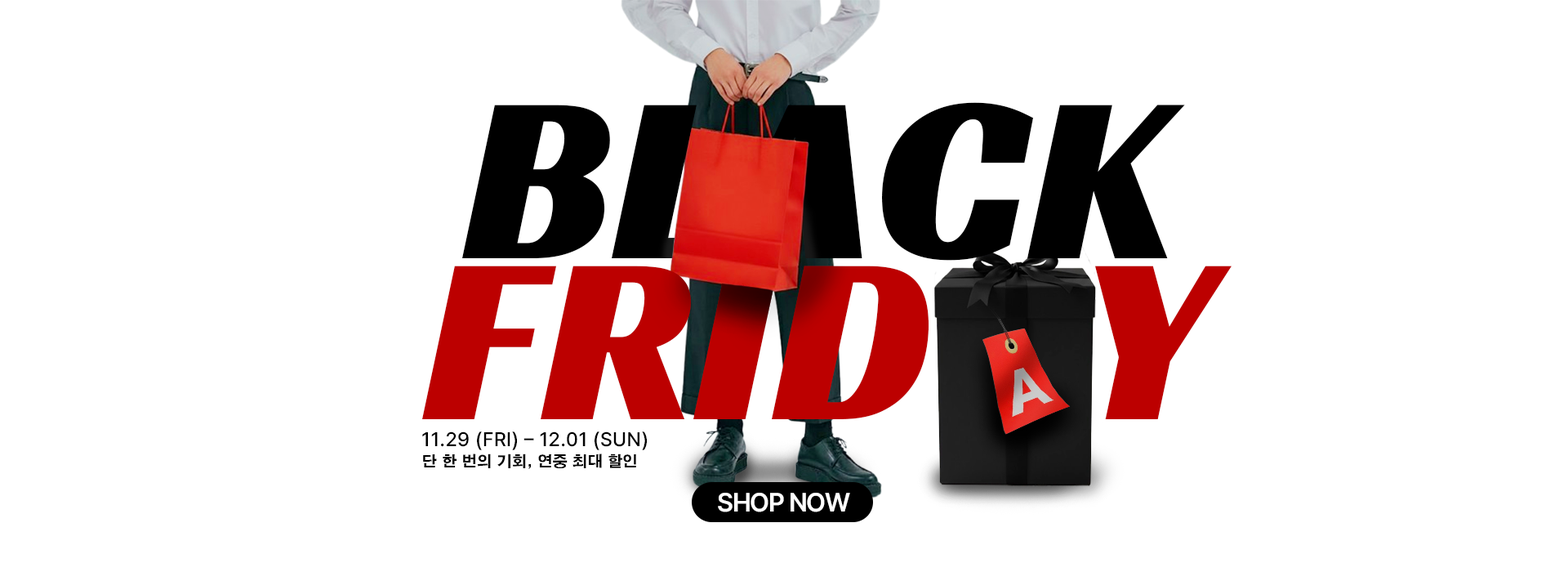
<style>
.page{position:relative;width:1568px;height:572px;background:#ffffff}
.page>*{position:absolute;margin:0}
.t1{font:241.2px "RacingSansOne-Regular";color:#000000}
.t2{font:241.2px "RacingSansOne-Regular";color:#bc0000}
.t3{font:19.6px "Pretendard-Medium";letter-spacing:0.02em;color:#000000}
.t4{font:15px "H2gtrE";color:#000000}
.t5{font:26.2px "Pretendard-SemiBold";letter-spacing:-0.04em;color:#ffffff}
</style>
<div class="page">
<p class="t1" style="left:462px;top:102px;width:723px;height:159px">BLACK</p>
<p class="t2" style="left:422px;top:265px;width:810px;height:154px">FRIDAY</p>
<p class="t3" style="left:422px;top:431px;width:225px;height:19px">11.29 (FRI) – 12.01 (SUN)</p>
<p class="t4" style="left:423px;top:453px;width:213px;height:16px">단 한 번의 기회, 연중 최대 할인</p>
<p class="t5" style="left:718px;top:492px;width:132px;height:20px">SHOP NOW</p>
</div>
